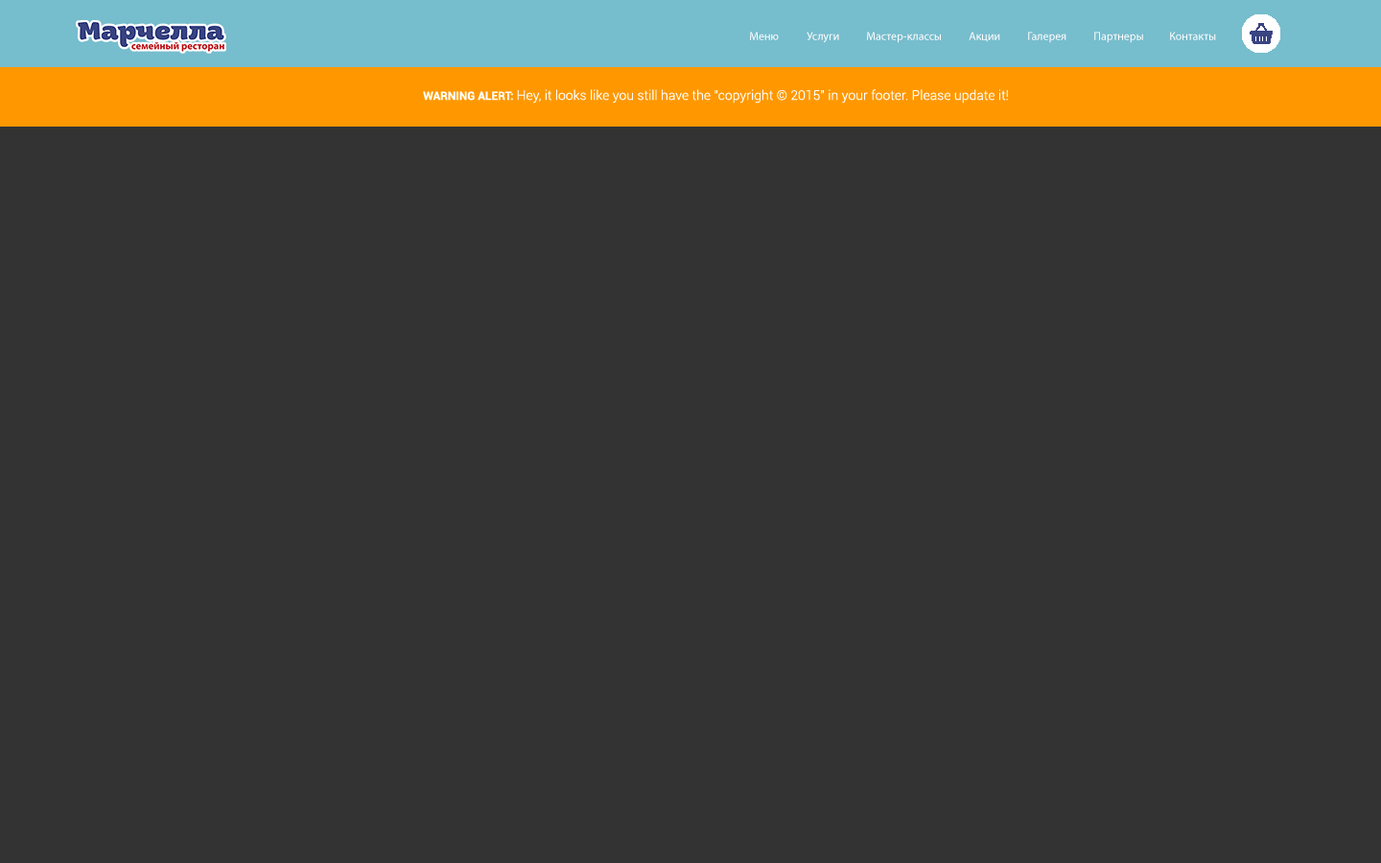
<style>
.page{position:relative;width:1381px;height:863px;background:#333333}
.page>*{position:absolute;margin:0}
.t1{font:11.5px "MyriadPro-Regular";color:#ffffff}
.t2{font:13.4px "Roboto-Light";color:#ffffff}
.t3{font:11.5px "Roboto-Bold";color:#ffffff}
</style>
<div class="page">
<p class="t1" style="left:750px;top:32px;width:29px;height:8px">Меню</p>
<p class="t1" style="left:807px;top:32px;width:32px;height:11px">Услуги</p>
<p class="t1" style="left:867px;top:32px;width:74px;height:11px">Мастер-классы</p>
<p class="t1" style="left:969px;top:32px;width:31px;height:10px">Акции</p>
<p class="t1" style="left:1028px;top:32px;width:39px;height:11px">Галерея</p>
<p class="t1" style="left:1094px;top:32px;width:49px;height:11px">Партнеры</p>
<p class="t1" style="left:1170px;top:32px;width:46px;height:8px">Контакты</p>
<p class="t2" style="left:423px;top:89px;width:585px;height:15px"><span class="t3">WARNING ALERT: </span>Hey, it looks like you still have the "copyright © 2015" in your footer. Please update it!</p>
</div>
